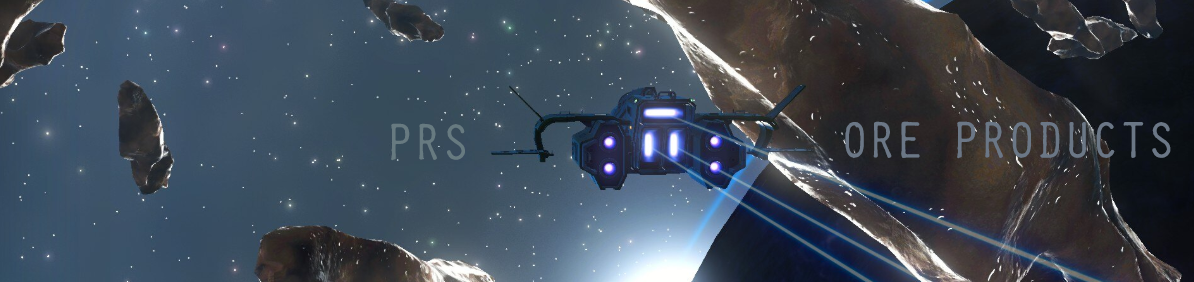
<style>
.page{position:relative;width:1194px;height:282px}
.page>*{position:absolute;margin:0}
.t1{font:53.2px "SelectricOrator-Regular";letter-spacing:0.12em;color:#677a80;scale:0.97 1}
.t2{font:53.2px "SelectricOrator-Regular";letter-spacing:0.12em;color:#6b7786;scale:0.97 1}
</style>
<div class="page">
<p class="t1" style="left:391px;top:123px;width:74px;height:38px">PRS</p>
<p class="t2" style="left:845px;top:121px;width:326px;height:38px">ORE PRODUCTS</p>
</div>
